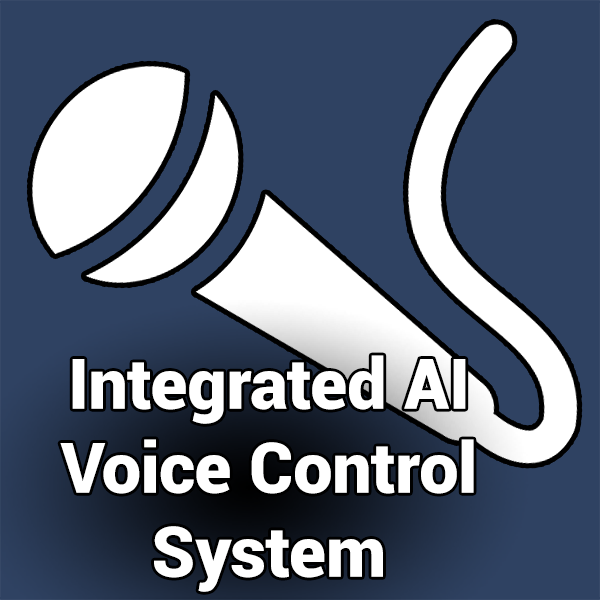
<style>
.page{position:relative;width:600px;height:600px;background:#2f4262}
.page>*{position:absolute;margin:0}
.t1{font:70px "Roboto-Black";color:#ffffff}
</style>
<div class="page">
<p class="t1" style="left:60px;top:355px;width:414px;height:237px;text-align:center">Integrated AI<br>Voice Control<br>System</p>
</div>
